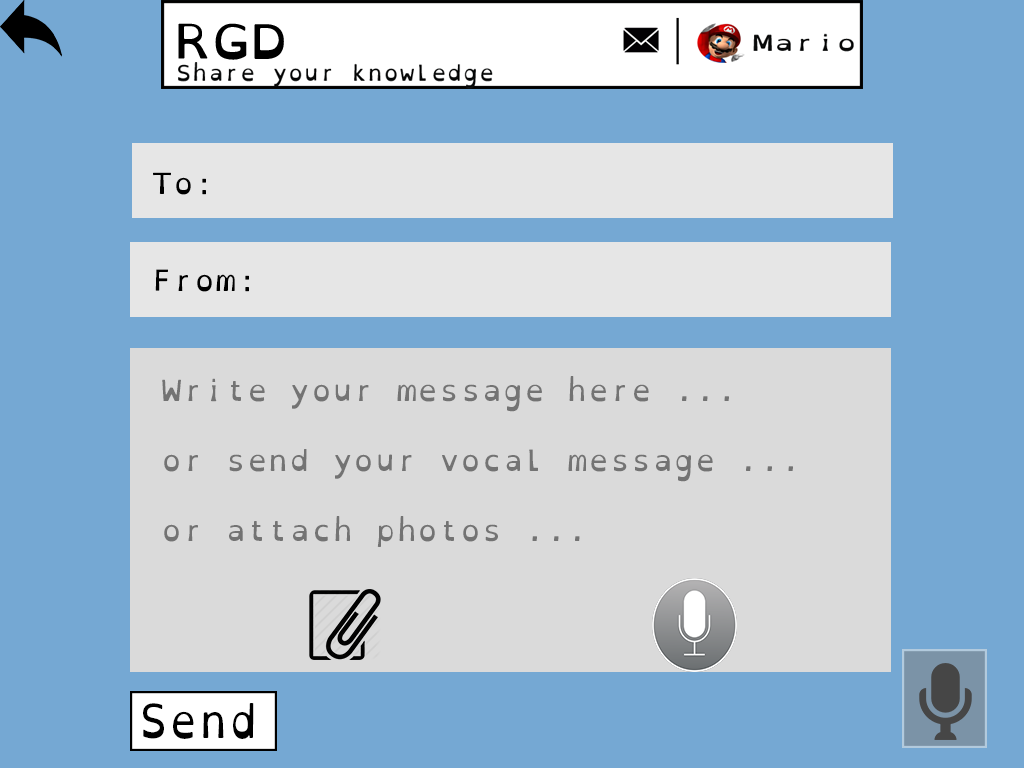
<style>
.page{position:relative;width:1024px;height:768px;background:#75a8d3}
.page>*{position:absolute;margin:0}
.t1{font:29.2px "OpenDyslexicMono-Regular";color:#000000}
.t2{font:29.2px "OpenDyslexicMono-Regular";color:#737373}
.t3{font:46.5px "OpenDyslexicMono-Regular";color:#000000;scale:0.88 1}
</style>
<div class="page">
<p class="t1" style="left:153px;top:172px;width:53px;height:23px">To:</p>
<p class="t1" style="left:155px;top:269px;width:94px;height:23px">From:</p>
<p class="t2" style="left:162px;top:376px;width:631px;height:171px">Write your message here ...<br><br>or send your vocal message ...<br><br>or attach photos ...</p>
<p class="t3" style="left:143px;top:703px;width:111px;height:36px">Send</p>
</div>
